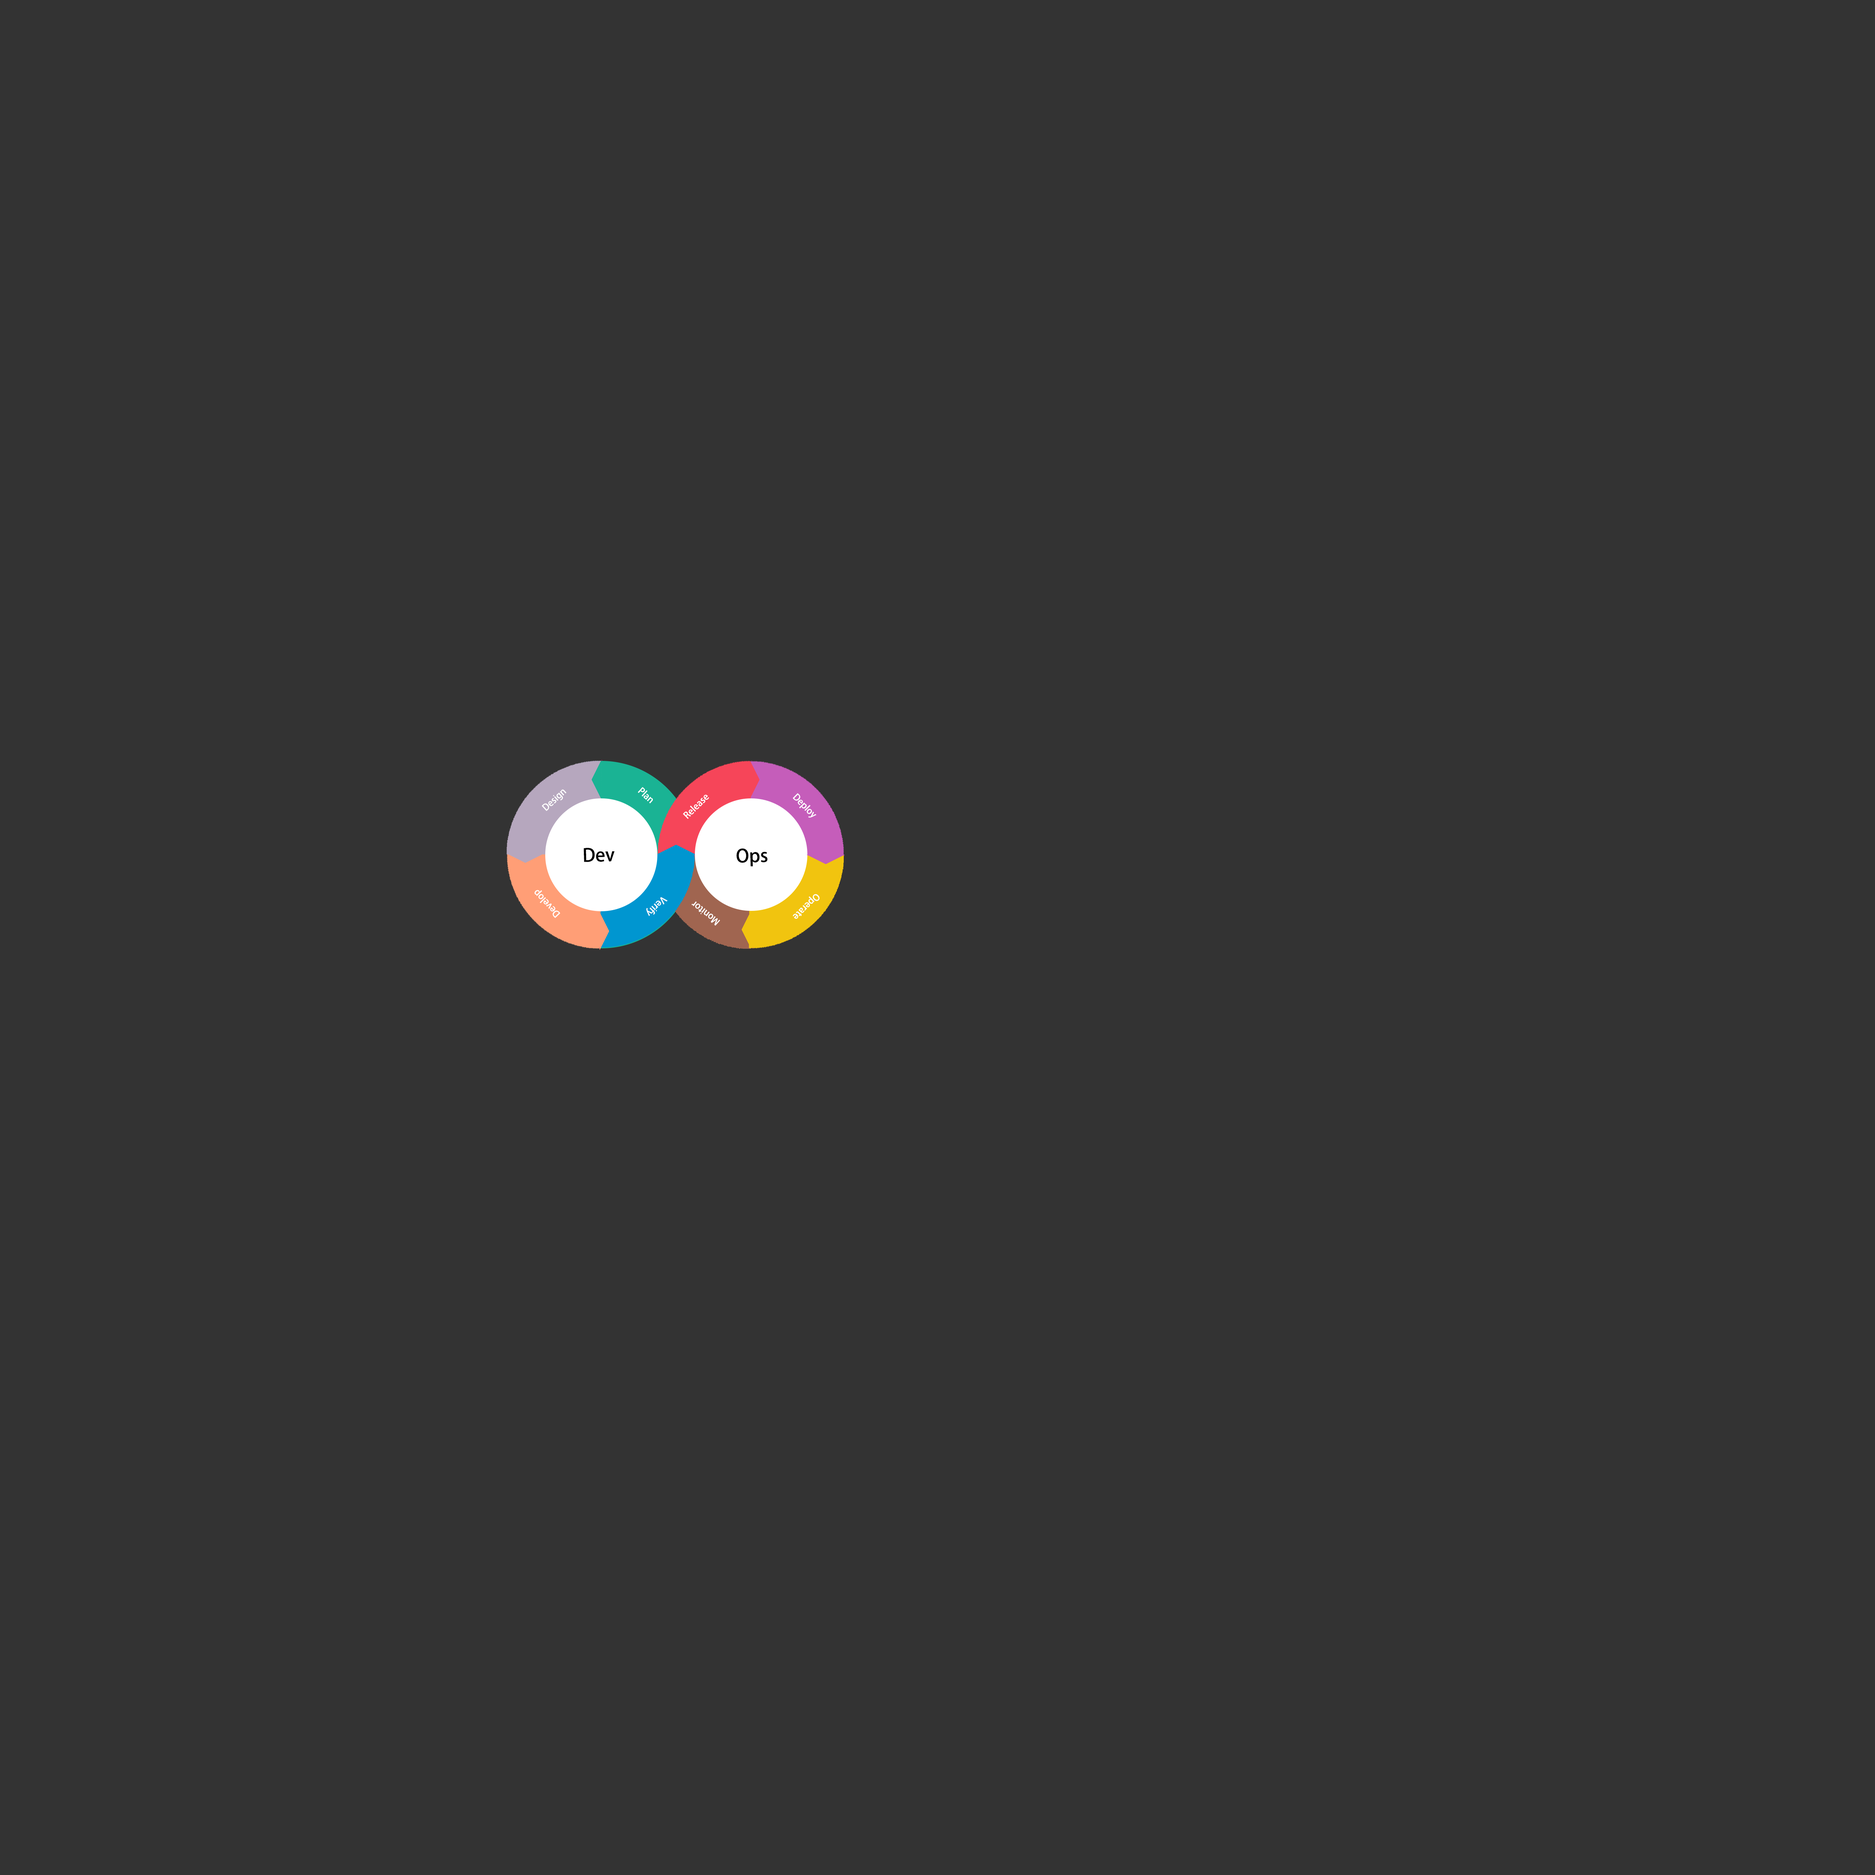
<style>
.page{position:relative;width:1875px;height:1875px;background:#333333}
.page>*{position:absolute;margin:0}
.t1{font:9px "AdobeHeitiStd-Regular";color:#ffffff}
.t2{font:18px "AdobeHeitiStd-Regular";color:#000000}
.t3{font:8.9px "AdobeHeitiStd-Regular";color:#ffffff}
</style>
<div class="page">
<p class="t1" style="left:541px;top:789px;width:26px;height:22px;rotate:-43deg">Design</p>
<p class="t1" style="left:638px;top:787px;width:15px;height:17px;rotate:42deg">Plan</p>
<p class="t1" style="left:683px;top:795px;width:26px;height:24px;rotate:-45deg">Release</p>
<p class="t1" style="left:793px;top:793px;width:23px;height:25px;rotate:46deg">Deploy</p>
<p class="t2" style="left:583px;top:848px;width:32px;height:14px;rotate:-1deg">Dev</p>
<p class="t2" style="left:736px;top:848px;width:32px;height:19px;rotate:-1deg">Ops</p>
<p class="t1" style="left:534px;top:890px;width:26px;height:28px;rotate:-134deg">Develop</p>
<p class="t1" style="left:793px;top:894px;width:27px;height:25px;rotate:136deg">Operate</p>
<p class="t1" style="left:646px;top:897px;width:21px;height:19px;rotate:135deg">Verify</p>
<p class="t3" style="left:691px;top:901px;width:29px;height:25px;rotate:-142deg">Monitor</p>
</div>
